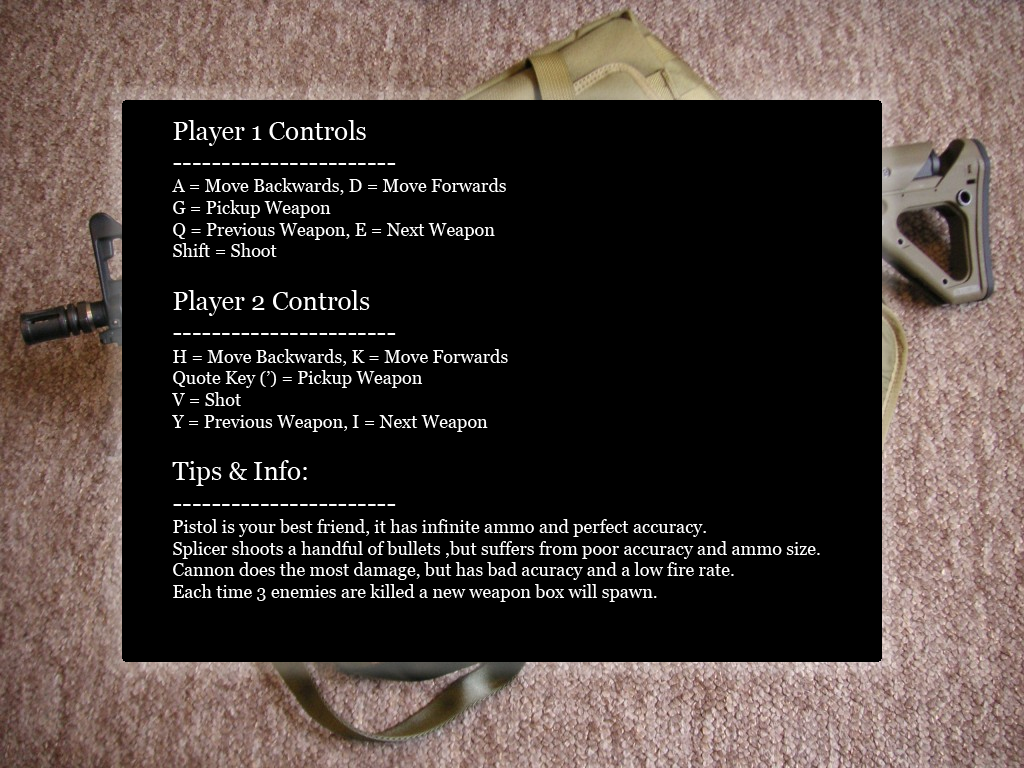
<style>
.page{position:relative;width:1024px;height:768px;background:#000000}
.page>*{position:absolute;margin:0}
.t1{font:18px "Georgia";color:#ffffff}
.t2{font:26px "Georgia";color:#ffffff}
</style>
<div class="page">
<p class="t1" style="left:172px;top:120px;width:648px;height:482px"><span class="t2">Player 1 Controls<br>-----------------------<br></span>A = Move Backwards, D = Move Forwards<br>G = Pickup Weapon<br>Q = Previous Weapon, E = Next Weapon<br>Shift = Shoot<br><br><span class="t2">Player 2 Controls<br>-----------------------<br></span>H = Move Backwards, K = Move Forwards<br>Quote Key (’) = Pickup Weapon<br>V = Shot<br>Y = Previous Weapon, I = Next Weapon<br><br><span class="t2">Tips &amp; Info:<br>-----------------------<br></span>Pistol is your best friend, it has infinite ammo and perfect accuracy.<br>Splicer shoots a handful of bullets ,but suffers from poor accuracy and ammo size.<br>Cannon does the most damage, but has bad acuracy and a low fire rate.<br>Each time 3 enemies are killed a new weapon box will spawn.</p>
</div>
